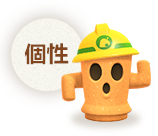
<style>
.page{position:relative;width:158px;height:136px;background:#ffffff}
.page>*{position:absolute;margin:0}
.t1{font:22px "MicrosoftYaHeiUI-Bold";color:#81461e}
</style>
<div class="page">
<p class="t1" style="left:24px;top:43px;width:45px;height:22px">個性</p>
</div>
